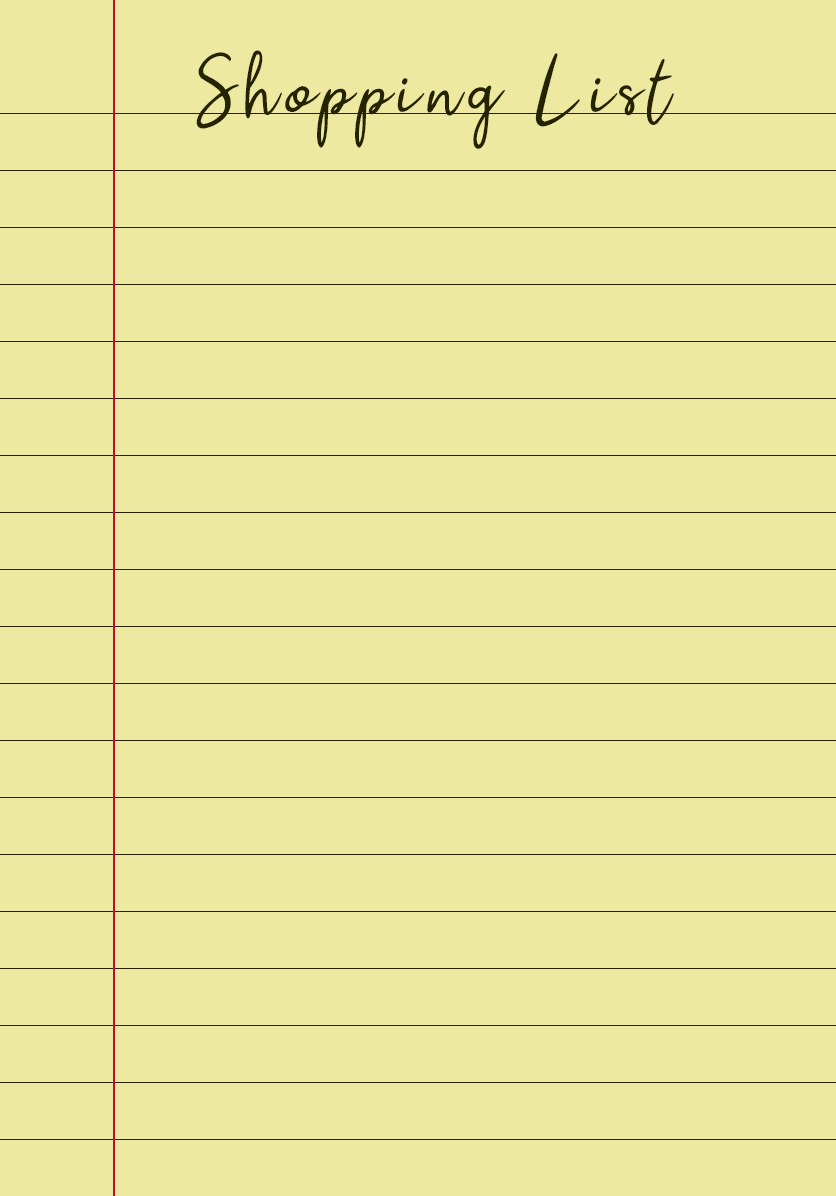
<style>
.page{position:relative;width:836px;height:1196px;background:#ede9a0}
.page>*{position:absolute;margin:0}
.t1{font:81px "PaulSignature";letter-spacing:0.1em;color:#262300}
</style>
<div class="page">
<p class="t1" style="left:196px;top:50px;width:478px;height:99px">Shopping List</p>
</div>
